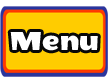
<style>
.page{position:relative;width:108px;height:84px;background:#ffcc00}
.page>*{position:absolute;margin:0}
.t1{font:29.4px "WendyOne-Regular";color:#ffffff;scale:1.09 1}
</style>
<div class="page">
<p class="t1" style="left:10px;top:32px;width:88px;height:19px">Menu</p>
</div>
